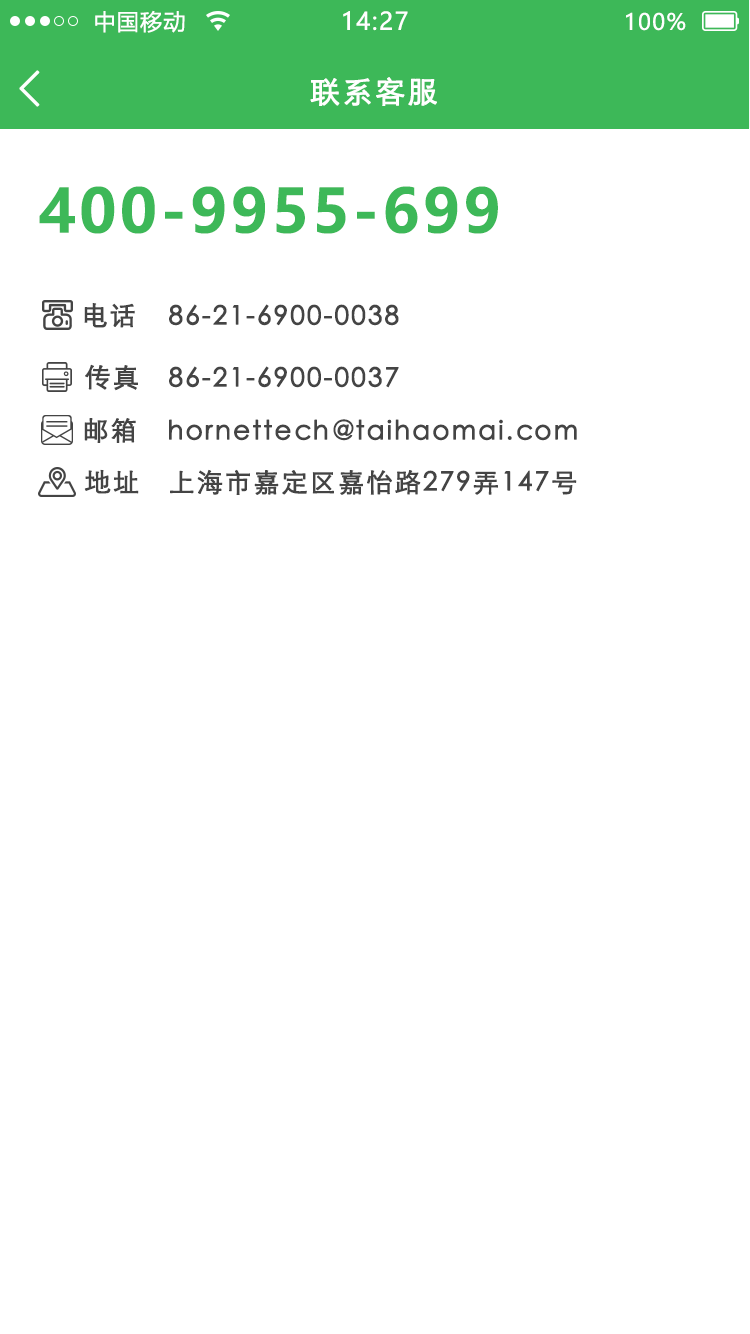
<style>
.page{position:relative;width:750px;height:1334px;background:#ffffff}
.page>*{position:absolute;margin:0}
.t1{font:22px "MicrosoftYaHei";letter-spacing:0.06em;color:#ffffff}
.t2{font:24px "MicrosoftYaHei";letter-spacing:0.06em;color:#ffffff}
.t3{font:49.8px "NSimSun";letter-spacing:0.06em;color:#fefffe;font-weight:bold}
.t4{font:30px "STXihei";letter-spacing:0.06em;color:#ffffff;font-weight:bold}
.t5{font:60px "MicrosoftYaHei-Bold";letter-spacing:0.06em;color:#3db858}
.t6{font:26px "STXihei";letter-spacing:0.06em;color:#444444;font-weight:bold}
</style>
<div class="page">
<p class="t1" style="left:95px;top:10px;width:90px;height:23px">中国移动</p>
<p class="t2" style="left:343px;top:11px;width:65px;height:20px">14:27</p>
<p class="t1" style="left:626px;top:12px;width:60px;height:19px">100%</p>
<p class="t3" style="left:19px;top:70px;width:21px;height:37px">&lt;</p>
<p class="t4" style="left:310px;top:77px;width:127px;height:29px">联系客服</p>
<p class="t5" style="left:39px;top:186px;width:459px;height:48px">400-9955-699</p>
<p class="t6" style="left:84px;top:303px;width:51px;height:25px">电话</p>
<p class="t6" style="left:169px;top:304px;width:230px;height:22px">86-21-6900-0038</p>
<p class="t6" style="left:85px;top:364px;width:53px;height:27px">传真</p>
<p class="t6" style="left:169px;top:366px;width:230px;height:22px">86-21-6900-0037</p>
<p class="t6" style="left:84px;top:418px;width:52px;height:25px">邮箱</p>
<p class="t6" style="left:169px;top:419px;width:408px;height:22px">hornettech@taihaomai.com</p>
<p class="t6" style="left:84px;top:469px;width:55px;height:25px">地址</p>
<p class="t6" style="left:170px;top:469px;width:407px;height:26px">上海市嘉定区嘉怡路279弄147号</p>
</div>
